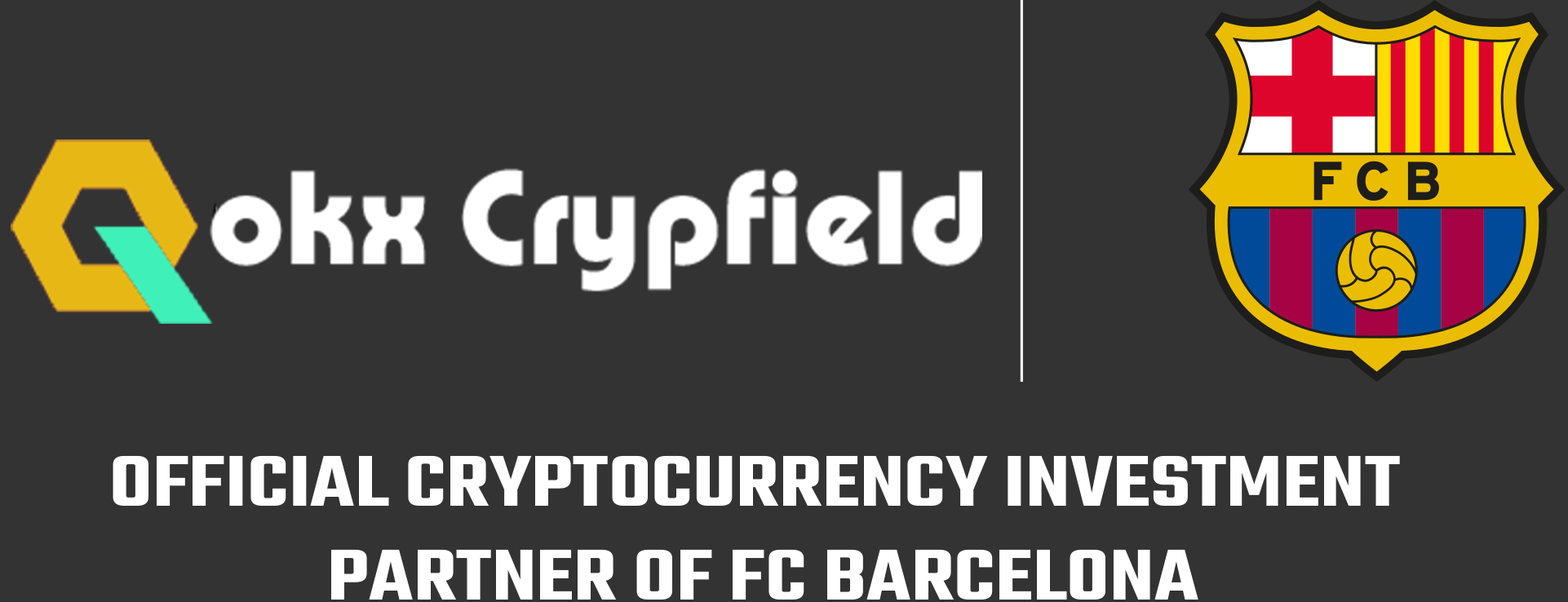
<style>
.page{position:relative;width:1568px;height:602px;background:#333333}
.page>*{position:absolute;margin:0}
.t1{font:78.2px "Teko-SemiBold";color:#ffffff;text-transform:uppercase;scale:1.17 1}
</style>
<div class="page">
<p class="t1" style="left:113px;top:455px;width:1287px;height:145px;text-align:center">OFFICIAL CRYPTOCURRENCY INVESTMENT <br>PARTNER OF FC BARCELONA</p>
</div>
